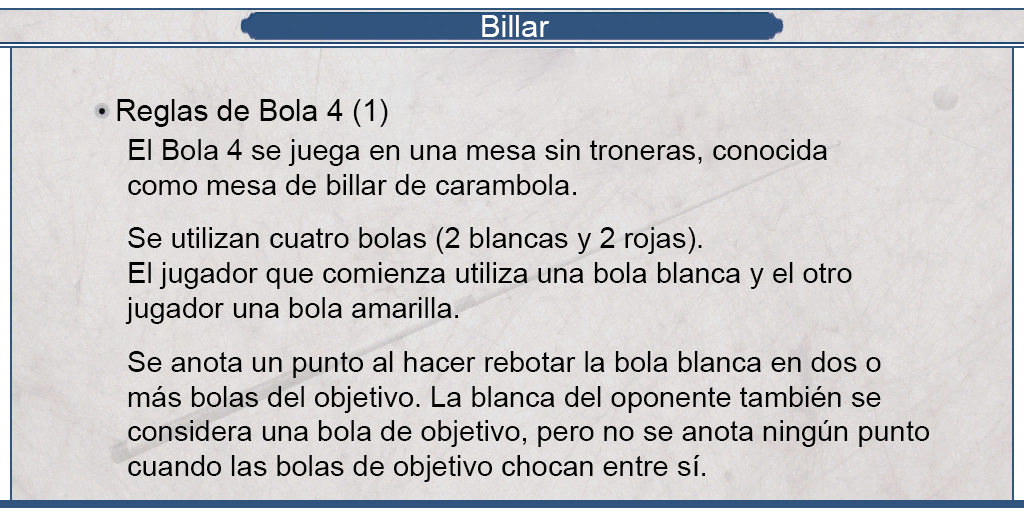
<style>
.page{position:relative;width:1024px;height:512px}
.page>*{position:absolute;margin:0}
.t1{font:30.8px "ArialMT";color:#ffffff}
.t2{font:30px "ArialMT";color:#000000}
.t3{font:29px "ArialMT";color:#000000}
</style>
<div class="page">
<p class="t1" style="left:482px;top:15px;width:68px;height:22px">Billar</p>
<p class="t2" style="left:117px;top:99px;width:271px;height:28px">Reglas de Bola 4 (1)</p>
<p class="t3" style="left:125px;top:139px;width:804px;height:343px;text-align:justify">El Bola 4 se juega en una mesa sin troneras, conocida <br>como mesa de billar de carambola.<br><br>Se utilizan cuatro bolas (2 blancas y 2 rojas). <br>El jugador que comienza utiliza una bola blanca y el otro <br>jugador una bola amarilla.<br><br>Se anota un punto al hacer rebotar la bola blanca en dos o <br>más bolas del objetivo. La blanca del oponente también se <br>considera una bola de objetivo, pero no se anota ningún punto <br>cuando las bolas de objetivo chocan entre sí.</p>
</div>
